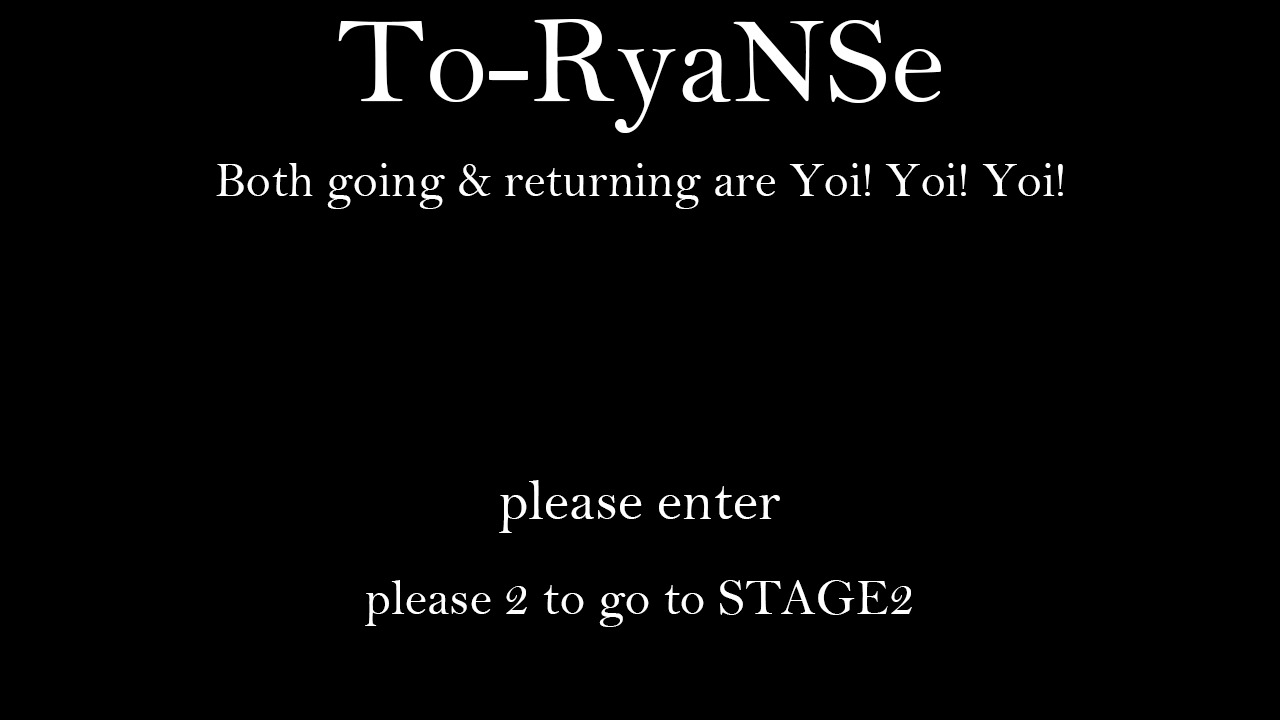
<style>
.page{position:relative;width:1280px;height:720px;background:#000000}
.page>*{position:absolute;margin:0}
.t1{font:125px "BellMT";color:#ffffff}
.t2{font:50px "BellMT";color:#ffffff}
.t3{font:58.3px "BellMT";color:#ffffff}
.t4{font:51px "BellMT";color:#ffffff}
</style>
<div class="page">
<p class="t1" style="left:338px;top:19px;width:603px;height:114px">To-RyaNSe</p>
<p class="t2" style="left:216px;top:163px;width:847px;height:46px">Both going &amp; returning are Yoi! Yoi! Yoi!</p>
<p class="t3" style="left:499px;top:480px;width:281px;height:53px">please enter</p>
<p class="t4" style="left:365px;top:580px;width:547px;height:47px">please 2 to go to STAGE2</p>
</div>
